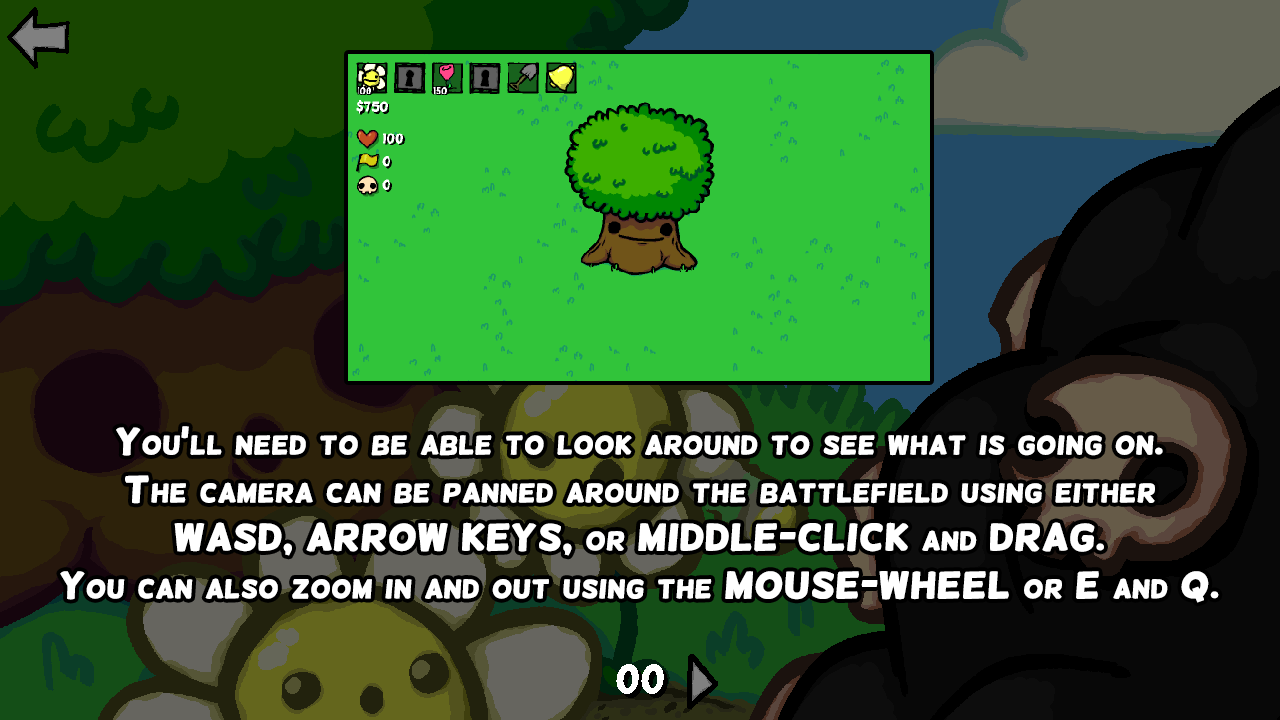
<style>
.page{position:relative;width:1280px;height:720px}
.page>*{position:absolute;margin:0}
.t1{font:35.9px/47.9px "Helsinki";color:#ffffff;font-variant:small-caps;font-weight:bold;scale:1.11 1}
</style>
<div class="page">
<p class="t1" style="left:60px;top:426px;width:1159px;height:177px;text-align:center">You’ll need to be able to look around to see what is going on.<br>The camera can be panned around the battlefield using either<br>WASD, ARROW KEYS, or MIDDLE-CLICK and DRAG.<br>You can also zoom in and out using the MOUSE-WHEEL or E and Q.</p>
</div>
